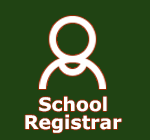
<style>
.page{position:relative;width:150px;height:140px;background:#204313}
.page>*{position:absolute;margin:0}
.t1{font:18.7px "Verdana-Bold";color:#fefffd}
</style>
<div class="page">
<p class="t1" style="left:39px;top:96px;width:68px;height:16px">School</p>
<p class="t1" style="left:25px;top:114px;width:97px;height:19px">Registrar</p>
</div>
